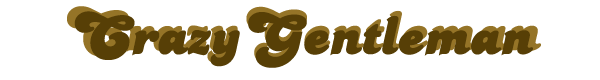
<style>
.page{position:relative;width:600px;height:80px;background:#ffffff}
.page>*{position:absolute;margin:0}
.t1{font:62.5px "TRCandice"}
.t2{font:60.4px "TRCandice";color:#573f06}
</style>
<div class="page">
<p class="t1" style="left:67px;top:6px;width:474px;height:59px">CrazyGentleman</p>
<p class="t2" style="left:74px;top:11px;width:459px;height:57px">CrazyGentleman</p>
</div>
